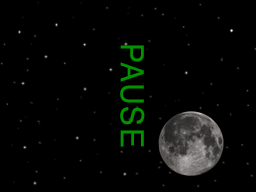
<style>
.page{position:relative;width:256px;height:192px;background:#000000}
.page>*{position:absolute;margin:0}
.t1{font:32.1px "Helvetica";letter-spacing:0.05em;color:#039200;scale:0.94 1}
</style>
<div class="page">
<p class="t1" style="left:120px;top:45px;width:25px;height:102px;rotate:90deg">PAUSE</p>
</div>
